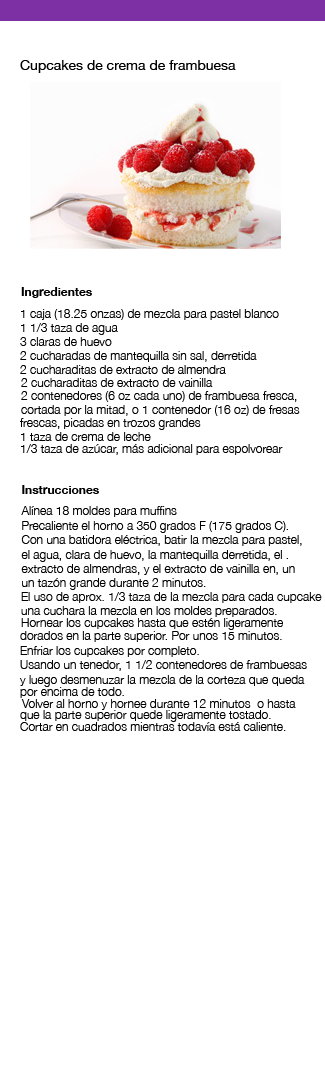
<style>
.page{position:relative;width:325px;height:1068px;background:#ffffff}
.page>*{position:absolute;margin:0}
.t1{font:14px "HelveticaNeue";color:#000000}
.t2{font:12px "HelveticaNeue-Bold";color:#000000}
.t3{font:12px "HelveticaNeue-Light";color:#000000}
</style>
<div class="page">
<p class="t1" style="left:20px;top:60px;width:216px;height:13px">Cupcakes de crema de frambuesa</p>
<p class="t2" style="left:21px;top:287px;width:71px;height:11px">Ingredientes</p>
<p class="t3" style="left:21px;top:309px;width:258px;height:11px">1 caja (18.25 onzas) de mezcla para pastel blanco</p>
<p class="t3" style="left:21px;top:323px;width:97px;height:12px">1 1/3 taza de agua</p>
<p class="t3" style="left:20px;top:337px;width:92px;height:9px">3 claras de huevo</p>
<p class="t3" style="left:20px;top:351px;width:237px;height:11px">2 cucharadas de mantequilla sin sal, derretida</p>
<p class="t3" style="left:20px;top:365px;width:206px;height:9px">2 cucharaditas de extracto de almendra</p>
<p class="t3" style="left:21px;top:378px;width:192px;height:9px">2 cucharaditas de extracto de vainilla</p>
<p class="t3" style="left:21px;top:391px;width:276px;height:11px">2 contenedores (6 oz cada uno) de frambuesa fresca,</p>
<p class="t3" style="left:21px;top:405px;width:279px;height:11px">cortada por la mitad, o 1 contenedor (16 oz) de fresas</p>
<p class="t3" style="left:20px;top:418px;width:181px;height:12px">frescas, picadas en trozos grandes</p>
<p class="t3" style="left:21px;top:432px;width:130px;height:9px">1 taza de crema de leche</p>
<p class="t3" style="left:21px;top:444px;width:262px;height:11px">1/3 taza de azúcar, más adicional para espolvorear</p>
<p class="t2" style="left:22px;top:485px;width:77px;height:9px">Instrucciones</p>
<p class="t3" style="left:21px;top:506px;width:156px;height:11px">Alínea 18 moldes para muffins</p>
<p class="t3" style="left:22px;top:521px;width:266px;height:12px">Precaliente el horno a 350 grados F (175 grados C).</p>
<p class="t3" style="left:21px;top:535px;width:281px;height:11px">Con una batidora eléctrica, batir la mezcla para pastel,</p>
<p class="t3" style="left:21px;top:550px;width:267px;height:12px">el agua, clara de huevo, la mantequilla derretida, el .</p>
<p class="t3" style="left:21px;top:564px;width:274px;height:11px">extracto de almendras, y el extracto de vainilla en, un</p>
<p class="t3" style="left:22px;top:578px;width:184px;height:12px">un tazón grande durante 2 minutos.</p>
<p class="t3" style="left:21px;top:592px;width:301px;height:11px">El uso de aprox. 1/3 taza de la mezcla para cada cupcake</p>
<p class="t3" style="left:21px;top:606px;width:256px;height:11px">una cuchara la mezcla en los moldes preparados.</p>
<p class="t3" style="left:21px;top:618px;width:262px;height:12px">Hornear los cupcakes hasta que estén ligeramente</p>
<p class="t3" style="left:20px;top:631px;width:262px;height:11px">dorados en la parte superior. Por unos 15 minutos.</p>
<p class="t3" style="left:20px;top:646px;width:179px;height:11px">Enfriar los cupcakes por completo.</p>
<p class="t3" style="left:20px;top:660px;width:287px;height:11px">Usando un tenedor, 1 1/2 contenedores de frambuesas</p>
<p class="t3" style="left:19px;top:675px;width:286px;height:12px">y luego desmenuzar la mezcla de la corteza que queda</p>
<p class="t3" style="left:20px;top:687px;width:104px;height:11px">por encima de todo.</p>
<p class="t3" style="left:21px;top:699px;width:275px;height:11px">Volver al horno y hornee durante 12 minutos  o hasta</p>
<p class="t3" style="left:20px;top:710px;width:251px;height:12px">que la parte superior quede ligeramente tostado.</p>
<p class="t3" style="left:20px;top:722px;width:266px;height:9px">Cortar en cuadrados mientras todavía está caliente.</p>
</div>
